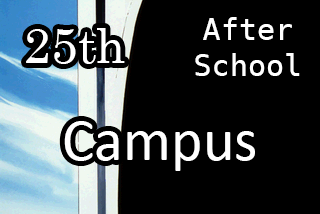
<style>
.page{position:relative;width:320px;height:214px;background:#000000}
.page>*{position:absolute;margin:0}
.t1{font:30px "DejaVuSansMono";color:#ffffff}
.t2{font:40px "Calibri";color:#ffffff}
.t3{font:48px "Century";color:#ffffff}
.t4{font:60px "Calibri";color:#ffffff}
</style>
<div class="page">
<p class="t1" style="left:195px;top:17px;width:105px;height:59px"><span class="t2"> </span>After<br>School</p>
<p class="t3" style="left:26px;top:28px;width:99px;height:36px">25th</p>
<p class="t4" style="left:64px;top:121px;width:191px;height:50px">Campus</p>
</div>
